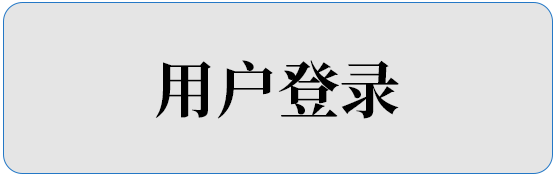
<style>
.page{position:relative;width:556px;height:177px;background:#e5e5e5}
.page>*{position:absolute;margin:0}
.t1{font:61.7px "SourceHanSerifSC-Bold";color:#000000}
</style>
<div class="page">
<p class="t1" style="left:155px;top:60px;width:244px;height:59px">用户登录</p>
</div>
